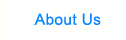
<style>
.page{position:relative;width:126px;height:40px;background:#ffffff}
.page>*{position:absolute;margin:0}
.t1{font:15.4px "ArialMT";letter-spacing:0.025em;color:#0a86ff}
</style>
<div class="page">
<p class="t1" style="left:34px;top:13px;width:67px;height:12px">About Us</p>
</div>
